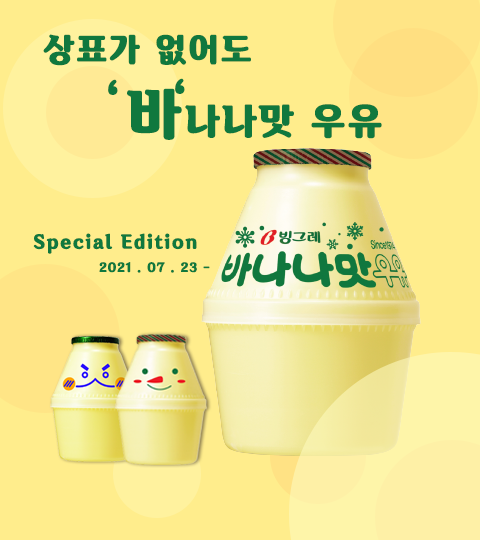
<style>
.page{position:relative;width:480px;height:540px;background:#ffed8c}
.page>*{position:absolute;margin:0}
.t1{font:32px "BinggraeII-Bold";letter-spacing:0.06em;color:#10783e;text-transform:uppercase;font-weight:bold}
.t2{font:40px "BinggraeII-Bold";letter-spacing:0.06em;color:#10783e;text-transform:uppercase;font-weight:bold}
.t3{font:36px "BinggraeII-Bold";letter-spacing:0.06em;color:#10783e;text-transform:uppercase;font-weight:bold}
.t4{font:55px "BinggraeII-Bold";letter-spacing:0.06em;color:#10783e;text-transform:uppercase;font-weight:bold}
.t5{font:18px "BinggraeII-Bold";letter-spacing:0.06em;color:#10783e;font-weight:bold}
.t6{font:12px "BinggraeII-Bold";letter-spacing:0.06em;color:#10783e;font-weight:bold}
</style>
<div class="page">
<p class="t1" style="left:43px;top:34px;width:208px;height:32px">상표가 없어도</p>
<p class="t2" style="left:175px;top:78px;width:10px;height:16px">‘</p>
<p class="t2" style="left:108px;top:79px;width:10px;height:16px">‘</p>
<p class="t3" style="left:127px;top:88px;width:255px;height:52px"><span class="t4">바</span>나나맛 우유</p>
<p class="t5" style="left:33px;top:233px;width:164px;height:21px">Special Edition</p>
<p class="t6" style="left:99px;top:262px;width:111px;height:11px">2021 . 07 . 23 -</p>
</div>
